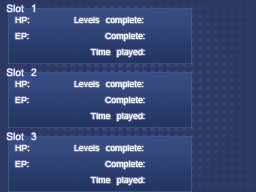
<style>
.page{position:relative;width:256px;height:192px;background:#2d3963}
.page>*{position:absolute;margin:0}
.t1{font:16px "Kartika";color:#ffffff}
.t2{font:14px/8px "Kartika";color:#ffffff}
</style>
<div class="page">
<p class="t1" style="left:6px;top:4px;width:29px;height:9px">Slot 1</p>
<p class="t2" style="left:15px;top:17px;width:130px;height:40px">HP:       Levels complete:<br> <br>EP:            Complete:    <br><br>            Time played:</p>
<p class="t1" style="left:6px;top:68px;width:31px;height:9px">Slot 2</p>
<p class="t2" style="left:15px;top:81px;width:130px;height:40px">HP:       Levels complete:<br> <br>EP:            Complete:    <br><br>            Time played:</p>
<p class="t1" style="left:6px;top:132px;width:31px;height:9px">Slot 3</p>
<p class="t2" style="left:15px;top:145px;width:130px;height:40px">HP:       Levels complete:<br> <br>EP:            Complete:    <br><br>            Time played:</p>
</div>
